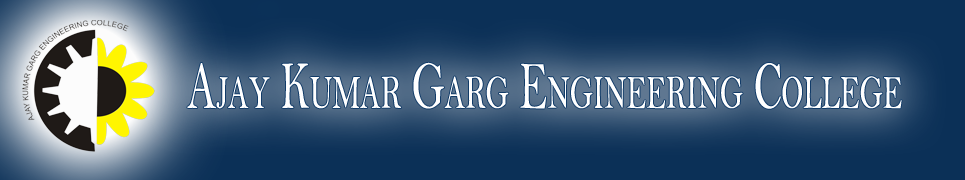
<style>
.page{position:relative;width:965px;height:180px;background:#0b3057}
.page>*{position:absolute;margin:0}
.t1{font:68.5px "BellMT";letter-spacing:-0.005em;color:#ffffff;font-variant:small-caps;scale:0.63 1}
</style>
<div class="page">
<p class="t1" style="left:187px;top:62px;width:715px;height:47px">Ajay Kumar Garg Engineering College</p>
</div>
